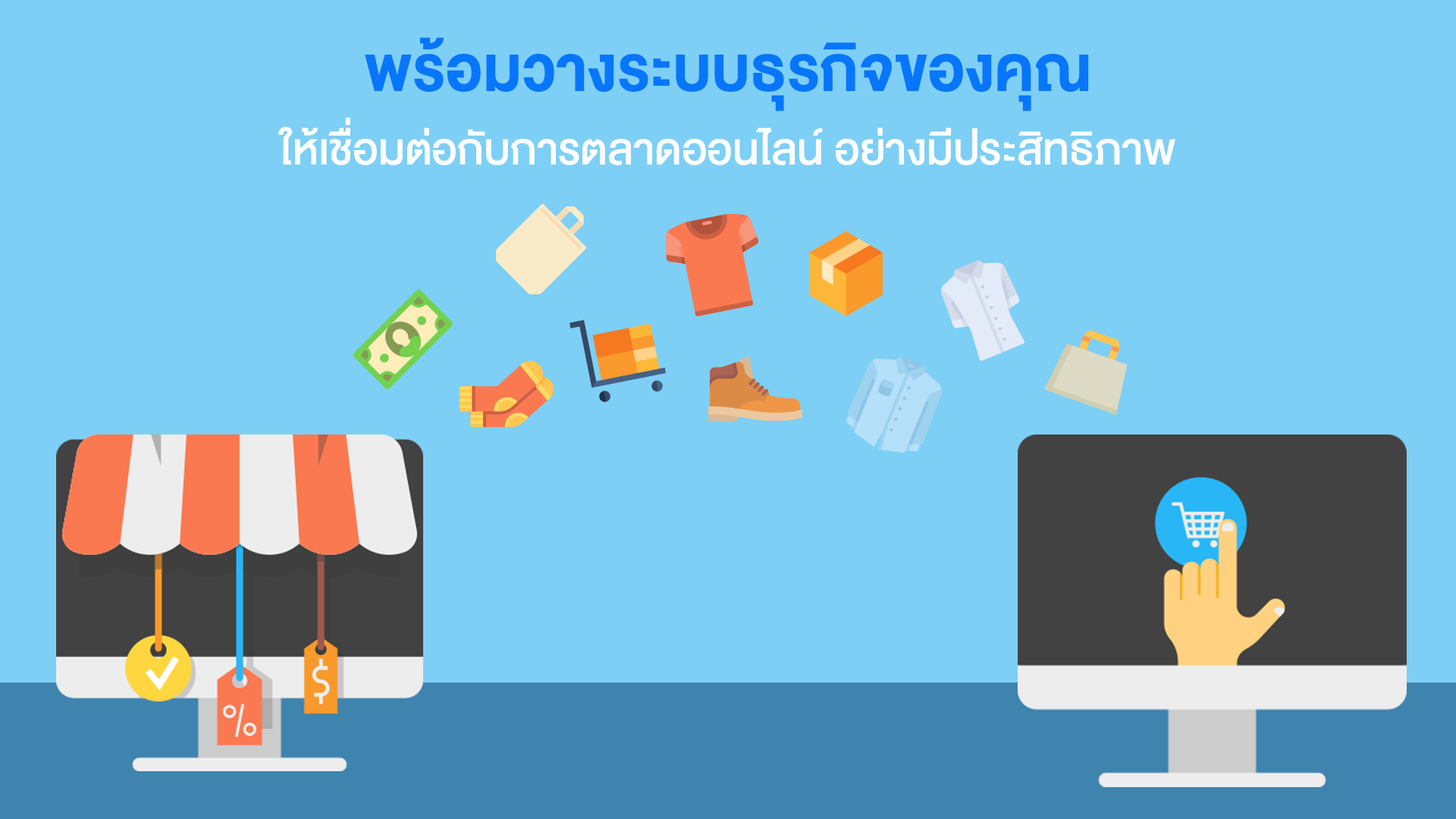
<style>
.page{position:relative;width:1456px;height:819px;background:#7dcff5}
.page>*{position:absolute;margin:0}
.t1{font:61.3px "DBHeavent-Med";color:#ffffff}
.t2{font:88.5px "DBHeavent-Bold";color:#0876fa}
</style>
<div class="page">
<p class="t1" style="left:278px;top:37px;width:897px;height:128px;text-align:center"><span class="t2">พร้อมวางระบบธุรกิจของคุณ<br></span>ให้เชื่อมต่อกับการตลาดออนไลน์ อย่างมีประสิทธิภาพ</p>
</div>
